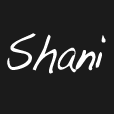
<style>
.page{position:relative;width:114px;height:114px;background:#1b1b1b}
.page>*{position:absolute;margin:0}
.t1{font:51.2px "Handwriting-Dakota";letter-spacing:-0.01em;color:#ffffff;font-weight:bold;scale:0.73 1}
</style>
<div class="page">
<p class="t1" style="left:7px;top:33px;width:99px;height:41px">Shani</p>
</div>
